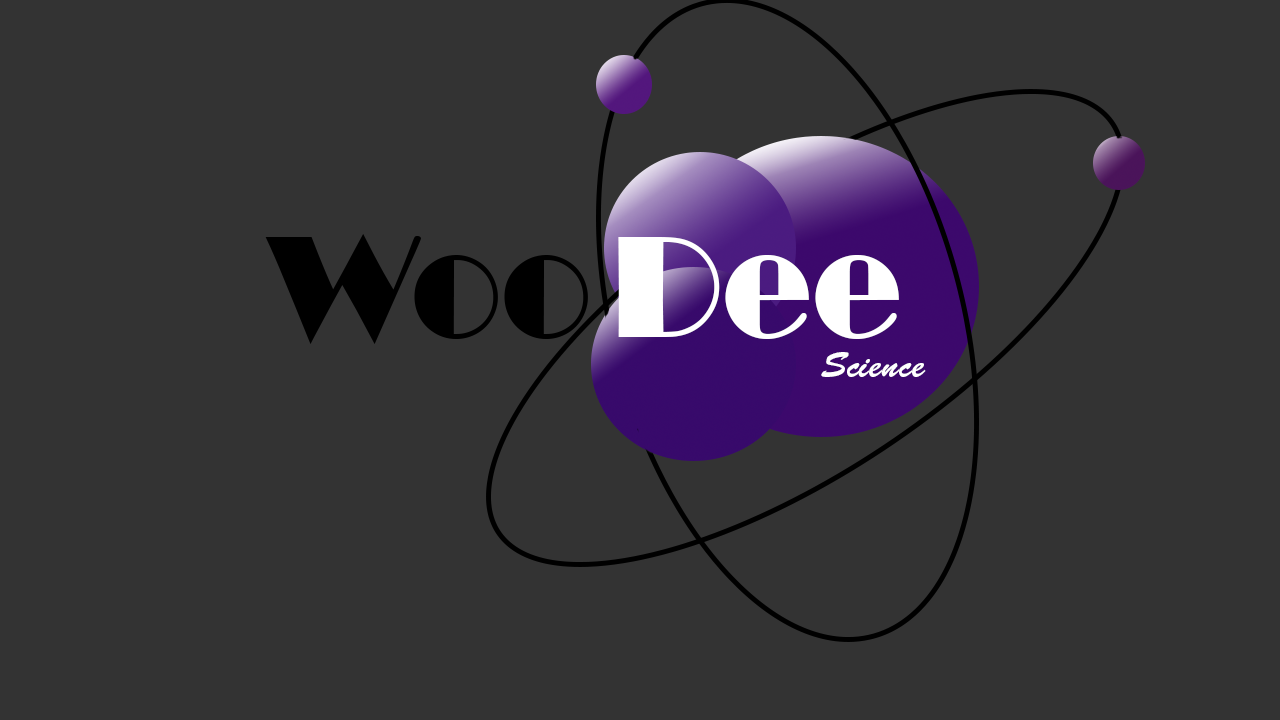
<style>
.page{position:relative;width:1280px;height:720px;background:#333333}
.page>*{position:absolute;margin:0}
.t1{font:150px "Broadway";color:#000000}
.t2{font:150px "Broadway";color:#ffffff}
.t3{font:36px "BrushScriptStd";color:#ffffff}
</style>
<div class="page">
<p class="t1" style="left:265px;top:234px;width:323px;height:110px">Woo</p>
<p class="t2" style="left:618px;top:237px;width:281px;height:102px">Dee</p>
<p class="t3" style="left:821px;top:352px;width:105px;height:25px">Science</p>
</div>
